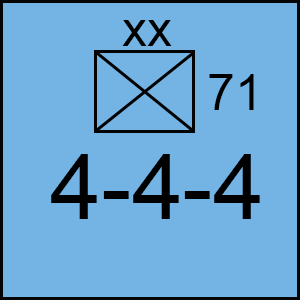
<style>
.page{position:relative;width:300px;height:300px;background:#74b4e4}
.page>*{position:absolute;margin:0}
.t1{font:50px "ArialMT";color:#000000}
.t2{font:91.7px "ArialMT";color:#000000}
</style>
<div class="page">
<p class="t1" style="left:122px;top:20px;width:50px;height:26px">xx</p>
<p class="t1" style="left:209px;top:74px;width:45px;height:36px">71</p>
<p class="t2" style="left:51px;top:154px;width:209px;height:65px">4-4-4</p>
</div>
